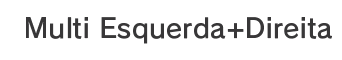
<style>
.page{position:relative;width:342px;height:60px;background:#ffffff}
.page>*{position:absolute;margin:0}
.t1{font:26.7px "RodinPro-DB";letter-spacing:0.008em;color:#383738}
</style>
<div class="page">
<p class="t1" style="left:26px;top:17px;width:306px;height:27px">Multi Esquerda+Direita</p>
</div>
